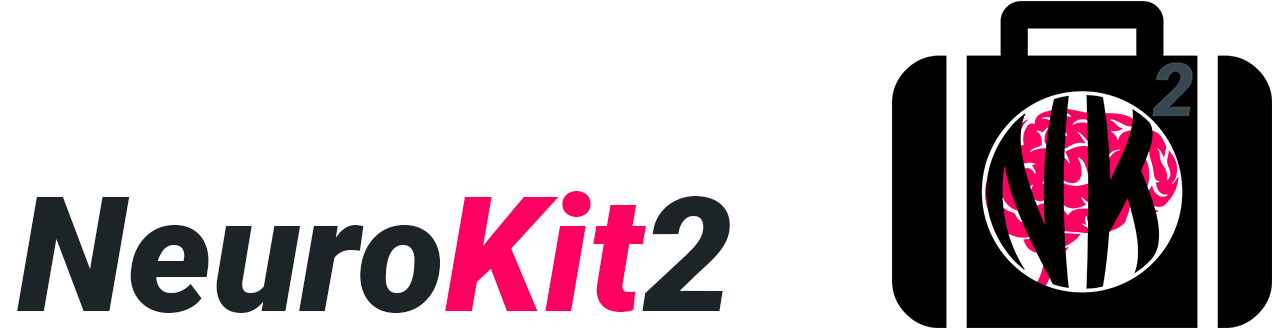
<style>
.page{position:relative;width:1280px;height:329px;background:#ffffff}
.page>*{position:absolute;margin:0}
.t1{font:160px "Roboto-BlackItalic";color:#1c2428}
.t2{font:160px "Roboto-BlackItalic";color:#ff0062}
</style>
<div class="page">
<p class="t1" style="left:17px;top:191px;width:713px;height:122px">Neuro<span class="t2">Kit</span>2</p>
</div>
